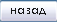
<style>
.page{position:relative;width:57px;height:22px}
.page>*{position:absolute;margin:0}
.t1{font:10.8px "CenturyGothic";color:#171818;scale:1.12 1}
</style>
<div class="page">
<p class="t1" style="left:11px;top:8px;width:35px;height:7px">назад</p>
</div>
